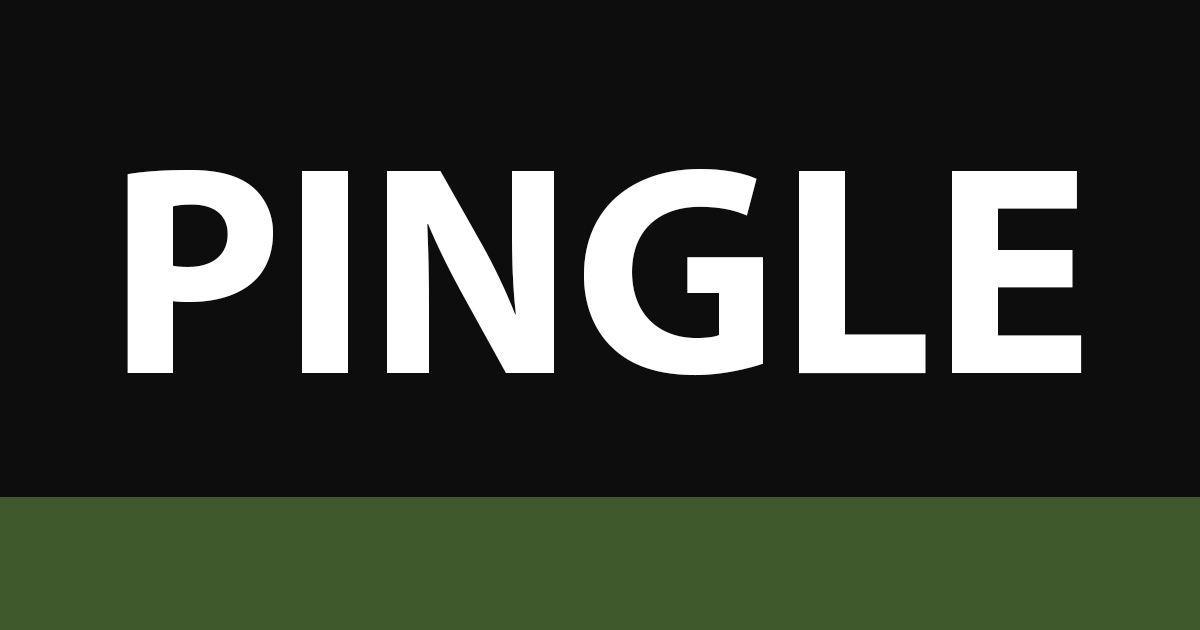
<style>
.page{position:relative;width:1200px;height:630px;background:#0d0d0d}
.page>*{position:absolute;margin:0}
.t1{font:300px "MyriadPro-Bold";color:#ffffff}
</style>
<div class="page">
<p class="t1" style="left:127px;top:169px;width:955px;height:207px">PINGLE</p>
</div>
